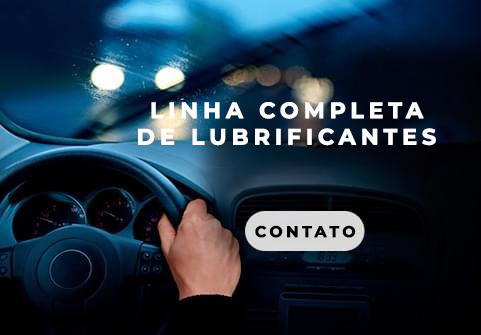
<style>
.page{position:relative;width:481px;height:335px}
.page>*{position:absolute;margin:0}
.t1{font:22px "Montserrat-Bold";letter-spacing:0.2em;color:#ffffff;font-weight:bold}
.t2{font:15.5px "Montserrat-Bold";letter-spacing:0.2em;color:#000000;font-weight:bold}
</style>
<div class="page">
<p class="t1" style="left:138px;top:102px;width:298px;height:44px;text-align:center">LINHA COMPLETA<br>DE LUBRIFICANTES</p>
<p class="t2" style="left:255px;top:225px;width:101px;height:13px">CONTATO</p>
</div>
